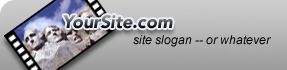
<style>
.page{position:relative;width:287px;height:70px}
.page>*{position:absolute;margin:0}
.t1{font:18px "AvenirLTStd-BlackOblique"}
.t2{font:12px "Arial-ItalicMT";color:#000000}
</style>
<div class="page">
<p class="t1" style="left:63px;top:15px;width:110px;height:14px">YourSite.com</p>
<p class="t2" style="left:133px;top:35px;width:138px;height:12px">site slogan -- or whatever</p>
</div>
